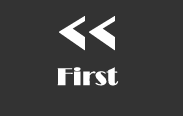
<style>
.page{position:relative;width:183px;height:116px;background:#333333}
.page>*{position:absolute;margin:0}
.t1{font:25px "Broadway";color:#ffffff}
.t2{font:60px "Broadway";color:#ffffff}
</style>
<div class="page">
<p class="t1" style="left:57px;top:16px;width:62px;height:70px;text-align:center"><span class="t2">&lt;&lt;<br></span>First</p>
</div>
